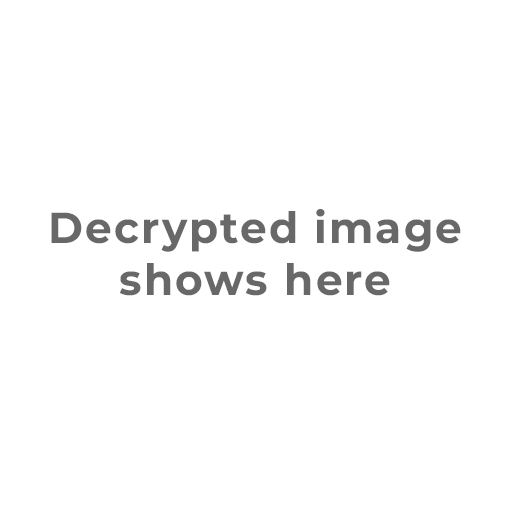
<style>
.page{position:relative;width:512px;height:512px;background:#ffffff}
.page>*{position:absolute;margin:0}
.t1{font:43.3px "Montserrat-Bold";letter-spacing:0.05em;color:#686868}
</style>
<div class="page">
<p class="t1" style="left:51px;top:209px;width:410px;height:87px;text-align:center">Decrypted image<br>shows here</p>
</div>
